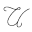
<style>
.page{position:relative;width:32px;height:32px;background:#ffffff}
.page>*{position:absolute;margin:0}
.t1{font:28.5px "LeagueScript"}
</style>
<div class="page">
<p class="t1" style="left:3px;top:6px;width:27px;height:22px">U</p>
</div>
